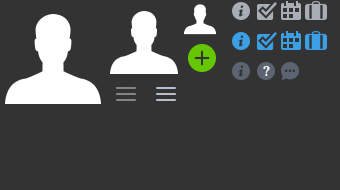
<style>
.page{position:relative;width:340px;height:190px;background:#333333}
.page>*{position:absolute;margin:0}
.t1{font:11.9px "BanglaMN-Bold";color:#f0f0f0}
</style>
<div class="page">
<p class="t1" style="left:263px;top:66px;width:7px;height:10px">?</p>
</div>
